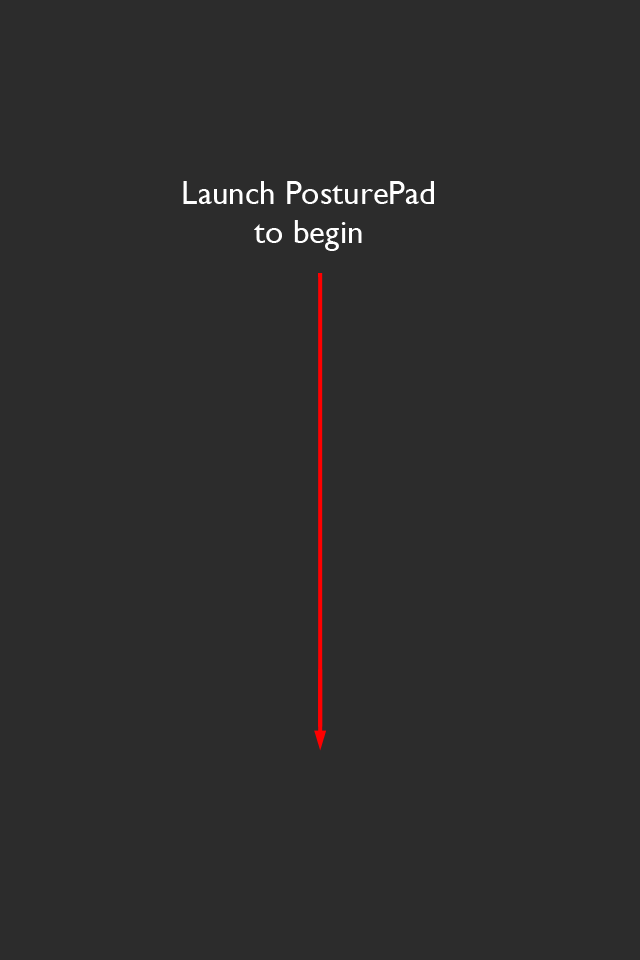
<style>
.page{position:relative;width:640px;height:960px;background:#2c2c2c}
.page>*{position:absolute;margin:0}
.t1{font:33.2px/39px "GillSansMT";color:#ffffff}
</style>
<div class="page">
<p class="t1" style="left:183px;top:181px;width:251px;height:70px;text-align:center">Launch PosturePad<br>to begin</p>
</div>
